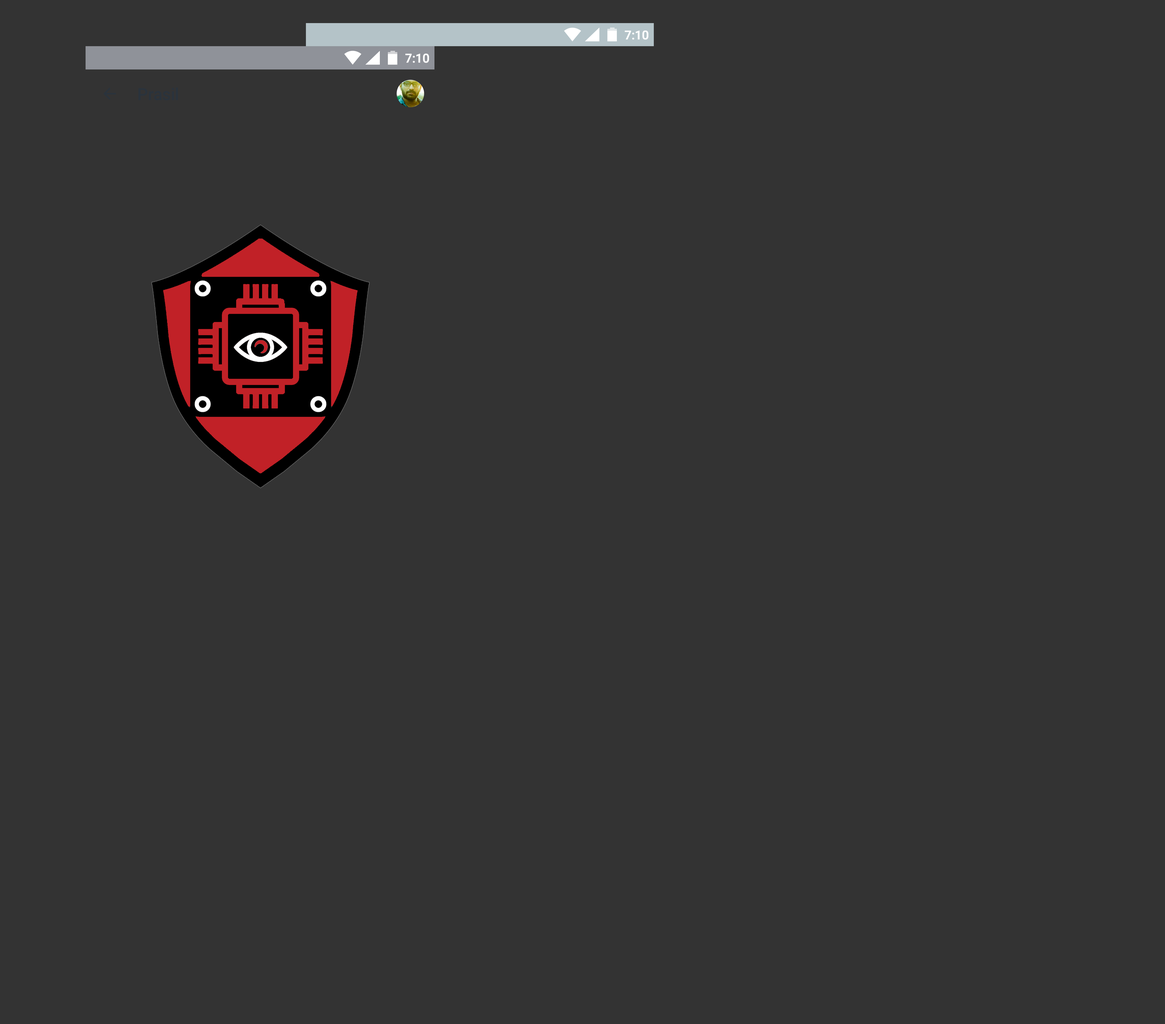
<style>
.page{position:relative;width:1165px;height:1024px;background:#333333}
.page>*{position:absolute;margin:0}
.t1{font:12.2px "Roboto-Medium";color:#ffffff}
.t2{font:12.3px "Roboto-Medium";color:#ffffff}
.t3{font:16.8px "Roboto-Medium";letter-spacing:-0.01em;color:#2a333c}
</style>
<div class="page">
<p class="t1" style="left:624px;top:31px;width:24px;height:9px">7:10</p>
<p class="t2" style="left:405px;top:54px;width:24px;height:9px">7:10</p>
<p class="t3" style="left:138px;top:88px;width:40px;height:12px">Prasil</p>
</div>
